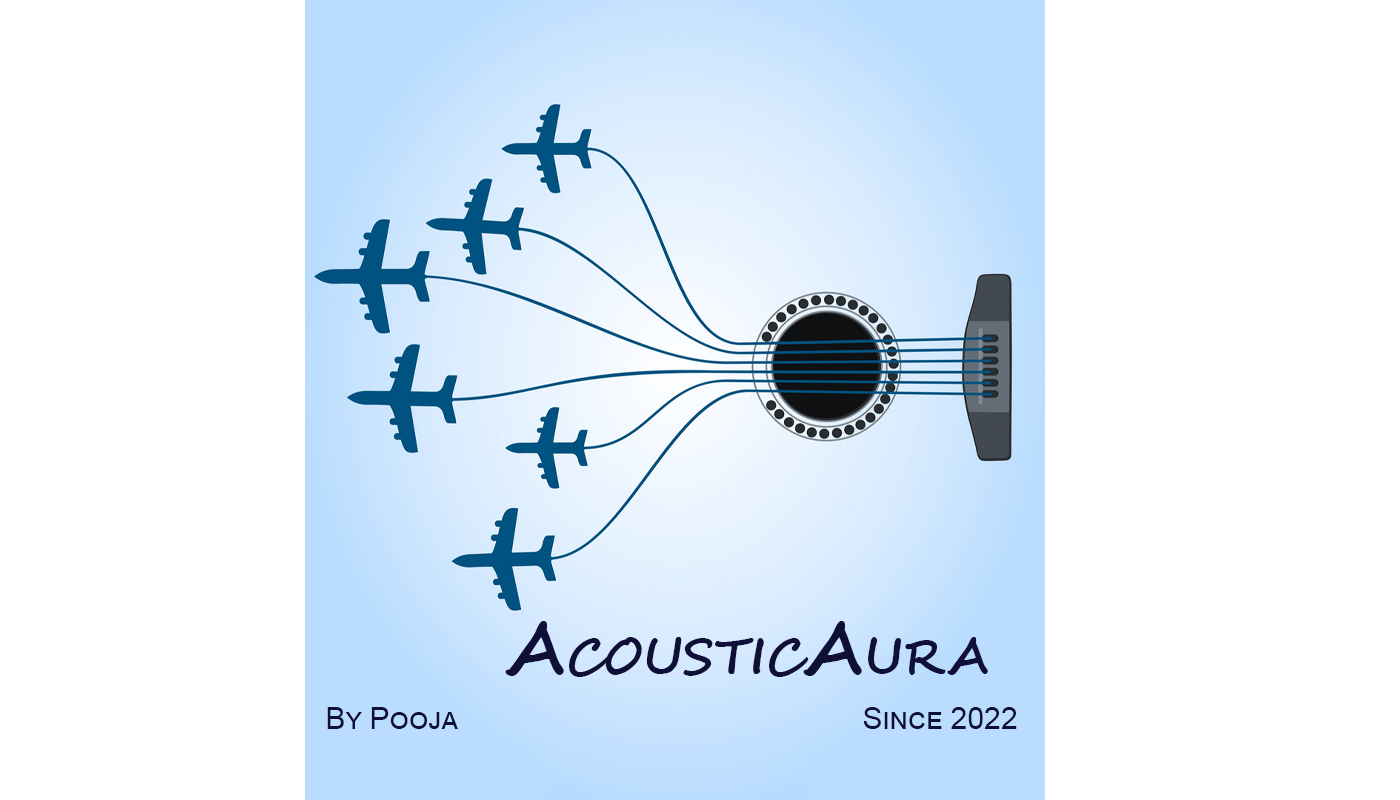
<style>
.page{position:relative;width:1400px;height:800px;background:#ffffff}
.page>*{position:absolute;margin:0}
.t1{font:72px "SegoeScript-Bold";color:#100f38;font-variant:small-caps}
.t2{font:30px "ArialMT";color:#100f38;font-variant:small-caps}
</style>
<div class="page">
<p class="t1" style="left:505px;top:621px;width:483px;height:56px">AcousticAura</p>
<p class="t2" style="left:327px;top:707px;width:131px;height:22px">By Pooja</p>
<p class="t2" style="left:863px;top:707px;width:154px;height:22px">Since 2022</p>
</div>
